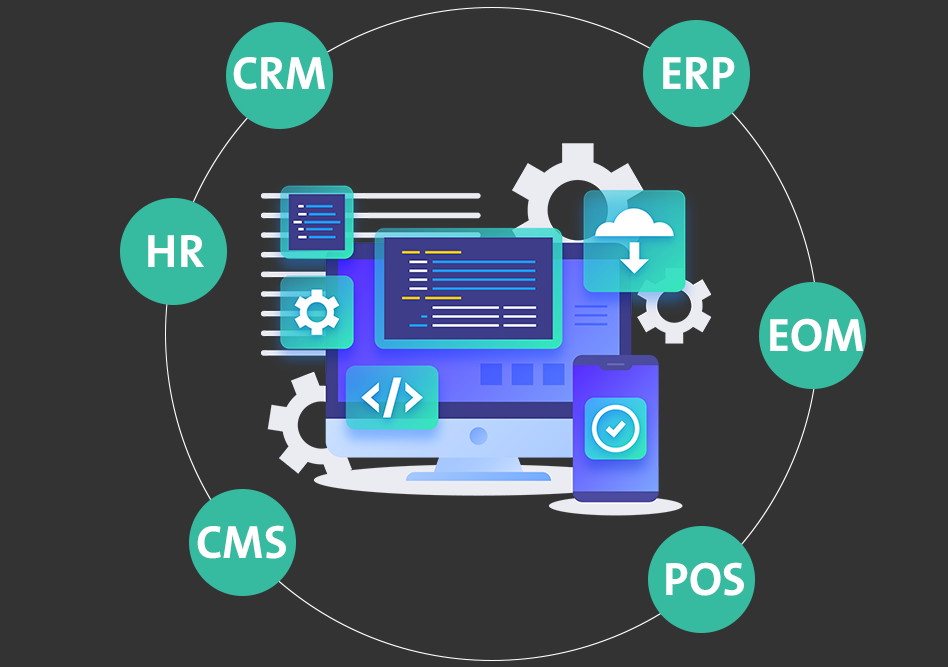
<style>
.page{position:relative;width:948px;height:667px;background:#333333}
.page>*{position:absolute;margin:0}
.t1{font:47px "BahijTheSansArabic-Bold";color:#ffffff;text-transform:uppercase}
</style>
<div class="page">
<p class="t1" style="left:233px;top:57px;width:92px;height:33px">crm</p>
<p class="t1" style="left:663px;top:57px;width:72px;height:32px">erp</p>
<p class="t1" style="left:148px;top:235px;width:56px;height:32px">hr</p>
<p class="t1" style="left:770px;top:318px;width:93px;height:34px">eom</p>
<p class="t1" style="left:197px;top:525px;width:89px;height:34px">cms</p>
<p class="t1" style="left:666px;top:562px;width:78px;height:34px">pos</p>
</div>
